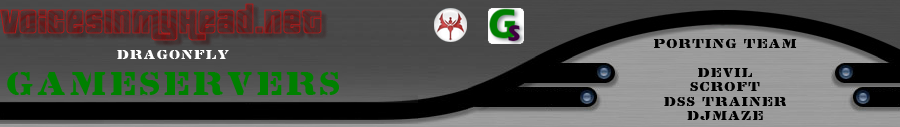
<style>
.page{position:relative;width:900px;height:127px}
.page>*{position:absolute;margin:0}
.t1{font:12px "LintsecMedium";letter-spacing:0.1em;color:#000000}
.t2{font:30px "LintsecMedium";letter-spacing:0.1em;color:#008000}
.t3{font:12px "LintsecMedium";letter-spacing:0.1em;color:#ffffff}
</style>
<div class="page">
<p class="t1" style="left:654px;top:39px;width:143px;height:81px;text-align:center">PORTING TEAM<br><br>DEVIL<br>SCROFT<br>DSS TRAINER<br>DJMAZE</p>
<p class="t2" style="left:7px;top:50px;width:332px;height:45px;text-align:center"><span class="t3">DRAGONFLY<br></span>GAMESERVERS</p>
</div>
